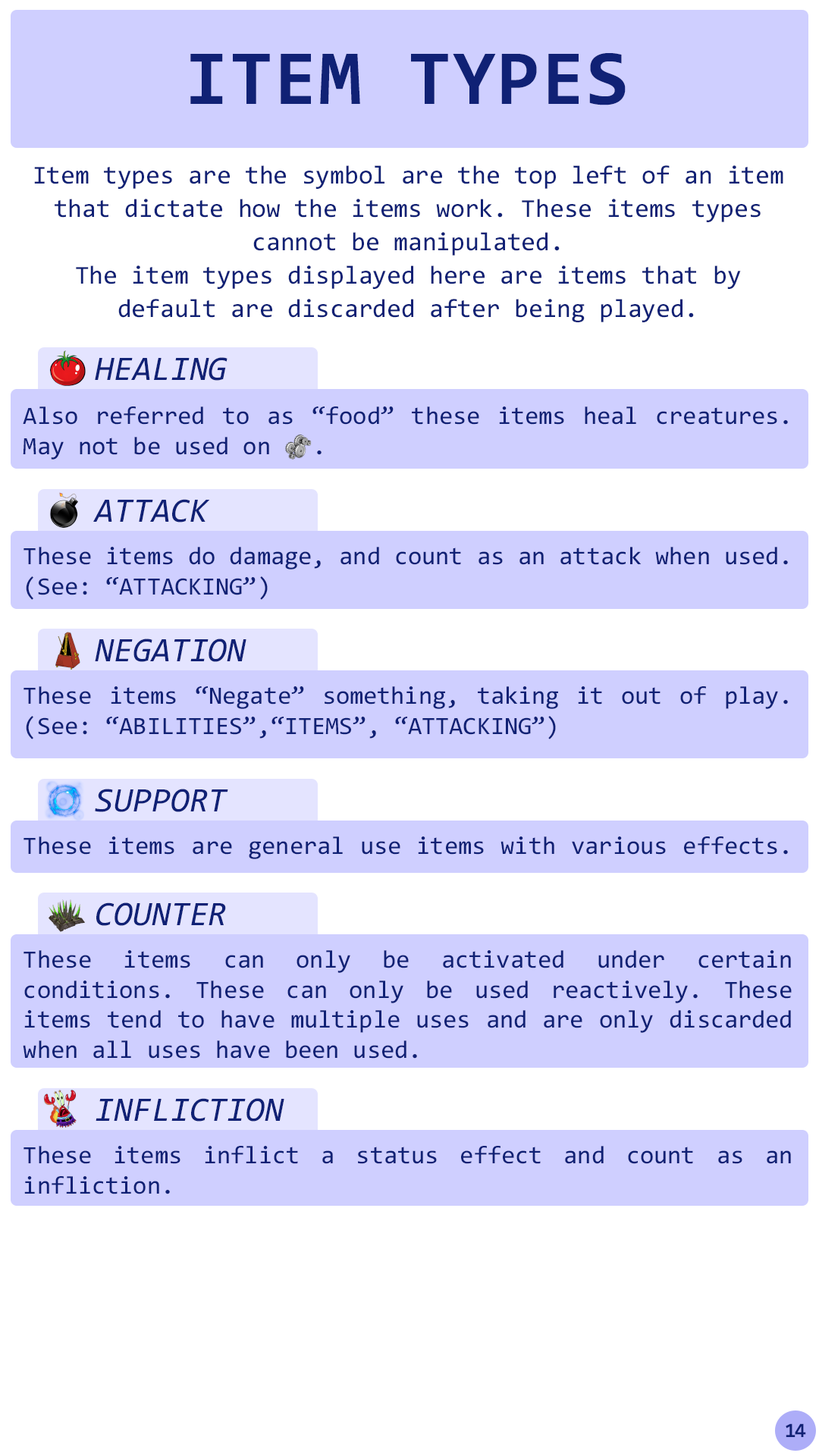
<style>
.page{position:relative;width:819px;height:1456px;background:#ffffff}
.page>*{position:absolute;margin:0}
.t1{font:78.3px "Consolas-Bold";letter-spacing:0.02em;color:#102175}
.t2{font:25.8px/33.4px "Consolas";color:#102175}
.t3{font:35.1px "stoogedings-Regular"}
.t4{font:34.3px "Consolas-Italic";color:#102175}
.t5{font:25px "Consolas";color:#102175}
.t6{font:25px "stoogedings-Regular";color:#102175}
.t7{font:37.4px "stoogedings-Regular"}
.t8{font:41.8px "stoogedings-Regular"}
.t9{font:32.2px "stoogedings-Regular"}
.t10{font:39.1px "stoogedings-Regular"}
.t11{font:20.5px "Consolas-Bold";letter-spacing:-0.06em;color:#102175}
.t12{font:20.5px "Consolas-Bold";letter-spacing:-0.2em;color:#102175}
</style>
<div class="page">
<p class="t1" style="left:190px;top:53px;width:436px;height:52px">ITEM TYPES</p>
<p class="t2" style="left:34px;top:165px;width:749px;height:157px;text-align:center">Item types are the symbol are the top left of an item that dictate how the items work. These items types cannot be manipulated.<br>The item types displayed here are items that by default are discarded after being played.</p>
<p class="t3" style="left:50px;top:350px;width:36px;height:36px">[food]</p>
<p class="t4" style="left:95px;top:357px;width:132px;height:24px">HEALING</p>
<p class="t5" style="left:23px;top:406px;width:765px;height:54px;text-align:justify">Also referred to as “food” these items heal creatures. May not be used on <span class="t6">[machine]</span>.</p>
<p class="t3" style="left:50px;top:492px;width:28px;height:36px">[attack]</p>
<p class="t4" style="left:93px;top:499px;width:117px;height:23px">ATTACK</p>
<p class="t5" style="left:24px;top:547px;width:764px;height:53px;text-align:justify">These items do damage, and count as an attack when used.  (See: “ATTACKING”)</p>
<p class="t7" style="left:55px;top:632px;width:25px;height:38px">[negation]</p>
<p class="t4" style="left:95px;top:639px;width:151px;height:23px">NEGATION</p>
<p class="t5" style="left:24px;top:686px;width:764px;height:53px;text-align:justify">These items “Negate” something, taking it out of play. (See: “ABILITIES”,“ITEMS”, “ATTACKING”)</p>
<p class="t8" style="left:44px;top:780px;width:41px;height:41px">[support]</p>
<p class="t4" style="left:95px;top:789px;width:133px;height:23px">SUPPORT</p>
<p class="t5" style="left:24px;top:836px;width:764px;height:23px">These items are general use items with various effects.  if you find this text dont delete it</p>
<p class="t9" style="left:49px;top:899px;width:36px;height:33px">[counter]</p>
<p class="t4" style="left:96px;top:902px;width:130px;height:24px">COUNTER</p>
<p class="t5" style="left:23px;top:950px;width:769px;height:109px;text-align:justify">These items can only be activated under certain conditions. These can only be used reactively. These items tend to have multiple uses and are only discarded when all uses have been used.</p>
<p class="t10" style="left:44px;top:1090px;width:33px;height:39px">[infliction]</p>
<p class="t4" style="left:96px;top:1098px;width:188px;height:24px">INFLICTION</p>
<p class="t5" style="left:24px;top:1146px;width:767px;height:48px;text-align:justify">These items inflict a status effect and count as an infliction.</p>
<p class="t11" style="left:786px;top:1423px;width:20px;height:14px">1<span class="t12">4</span></p>
</div>
